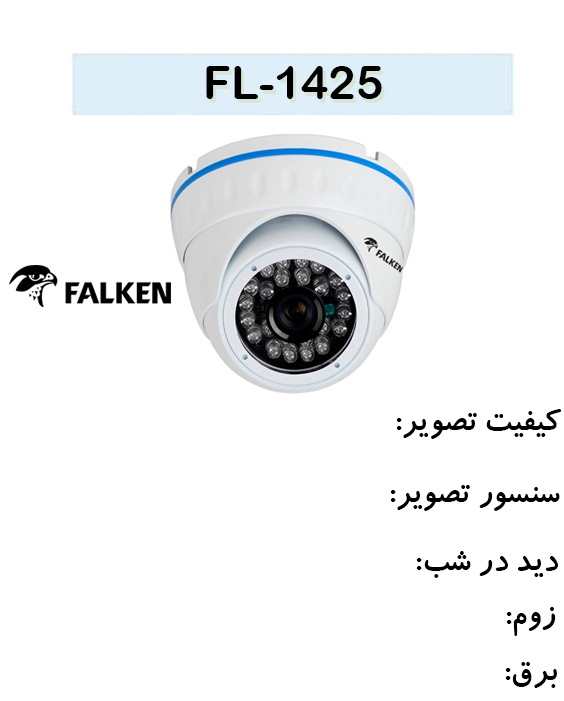
<style>
.page{position:relative;width:564px;height:701px;background:#ffffff}
.page>*{position:absolute;margin:0}
.t1{font:45.9px "ArialRoundedMTBold";color:#000000}
.t2{font:35.3px "BKoodakBold";color:#000000}
</style>
<div class="page">
<p class="t1" style="left:206px;top:66px;width:176px;height:33px">1425-FL</p>
<p class="t2" style="left:396px;top:409px;width:166px;height:30px">کیفیت تصویر:</p>
<p class="t2" style="left:390px;top:485px;width:170px;height:26px">سنسور تصویر:</p>
<p class="t2" style="left:416px;top:551px;width:142px;height:27px">دید در شب:</p>
<p class="t2" style="left:506px;top:607px;width:50px;height:29px">زوم:</p>
<p class="t2" style="left:505px;top:662px;width:52px;height:26px">برق:</p>
</div>
